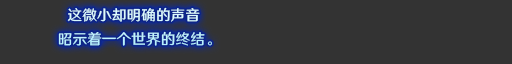
<style>
.page{position:relative;width:512px;height:64px;background:#333333}
.page>*{position:absolute;margin:0}
.t1{font:14.7px/24px "HYWenHei-FEW";letter-spacing:0.005em}
</style>
<div class="page">
<p class="t1" style="left:58px;top:7px;width:154px;height:39px;text-align:center">这微小却明确的声音<br>  昭示着一个世界的终结。</p>
</div>
